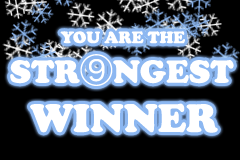
<style>
.page{position:relative;width:240px;height:160px;background:#000000}
.page>*{position:absolute;margin:0}
.t1{font:17px "CooperBlack";color:#ffffff}
.t2{font:33px "CooperBlack";color:#ffffff}
.t3{font:33px "HiraKakuProN-W3";color:#ffffff}
.t4{font:41px "CooperBlack";color:#ffffff}
</style>
<div class="page">
<p class="t1" style="left:10px;top:31px;width:224px;height:102px">YOU ARE THE <br><span class="t2">STR</span><span class="t3">⑨</span><span class="t2">NGEST<br></span><span class="t4">  WINNER</span></p>
</div>
